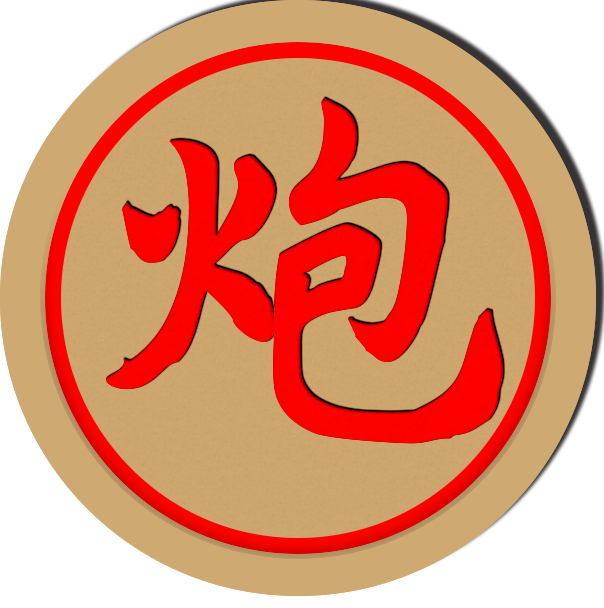
<style>
.page{position:relative;width:604px;height:608px;background:#ffffff}
.page>*{position:absolute;margin:0}
.t1{font:416.7px "AaYuwenlaoshidezi";letter-spacing:0.04em;color:#ff0000}
</style>
<div class="page">
<p class="t1" style="left:106px;top:98px;width:397px;height:346px">炮</p>
<p class="t1" style="left:106px;top:98px;width:397px;height:346px">炮</p>
</div>
